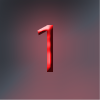
<style>
.page{position:relative;width:100px;height:100px}
.page>*{position:absolute;margin:0}
.t1{font:72px "MyriadPro-Regular"}
</style>
<div class="page">
<p class="t1" style="left:37px;top:25px;width:16px;height:47px">1</p>
</div>
